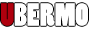
<style>
.page{position:relative;width:90px;height:30px;background:#ffffff}
.page>*{position:absolute;margin:0}
.t1{font:30px "PoplarStd";color:#ffffff}
.t2{font:30px "PoplarStd";color:#af000e}
</style>
<div class="page">
<p class="t1" style="left:1px;top:3px;width:87px;height:23px"><span class="t2">U</span>BERMO</p>
</div>
